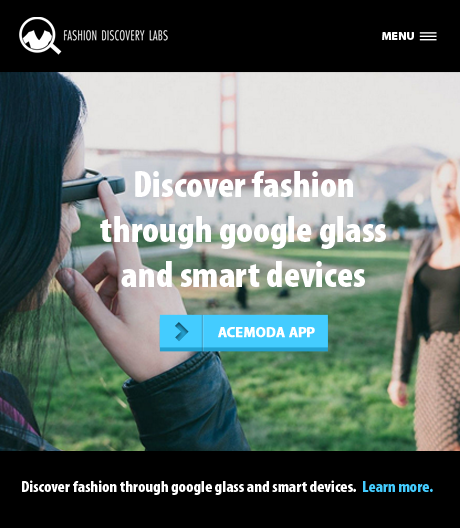
<style>
.page{position:relative;width:460px;height:528px;background:#000000}
.page>*{position:absolute;margin:0}
.t1{font:11.7px "MyriadPro-Black";color:#ffffff;text-transform:uppercase}
.t2{font:37.3px "MyriadPro-BlackCond";color:#ffffff}
.t3{font:14px "MyriadPro-Bold";color:#ffffff;text-transform:uppercase;font-weight:bold}
.t4{font:16.2px "MyriadPro-BlackCond";color:#ffffff}
.t5{font:16.2px "MyriadPro-BlackCond";color:#44ccff}
</style>
<div class="page">
<p class="t1" style="left:382px;top:32px;width:32px;height:8px">Menu</p>
<p class="t2" style="left:100px;top:171px;width:286px;height:116px;text-align:center">Discover fashion<br>through google glass<br>and smart devices</p>
<p class="t3" style="left:218px;top:327px;width:97px;height:11px">Acemoda app</p>
<p class="t4" style="left:22px;top:480px;width:411px;height:15px">Discover fashion through google glass and smart devices.  <span class="t5">Learn more.</span></p>
</div>
